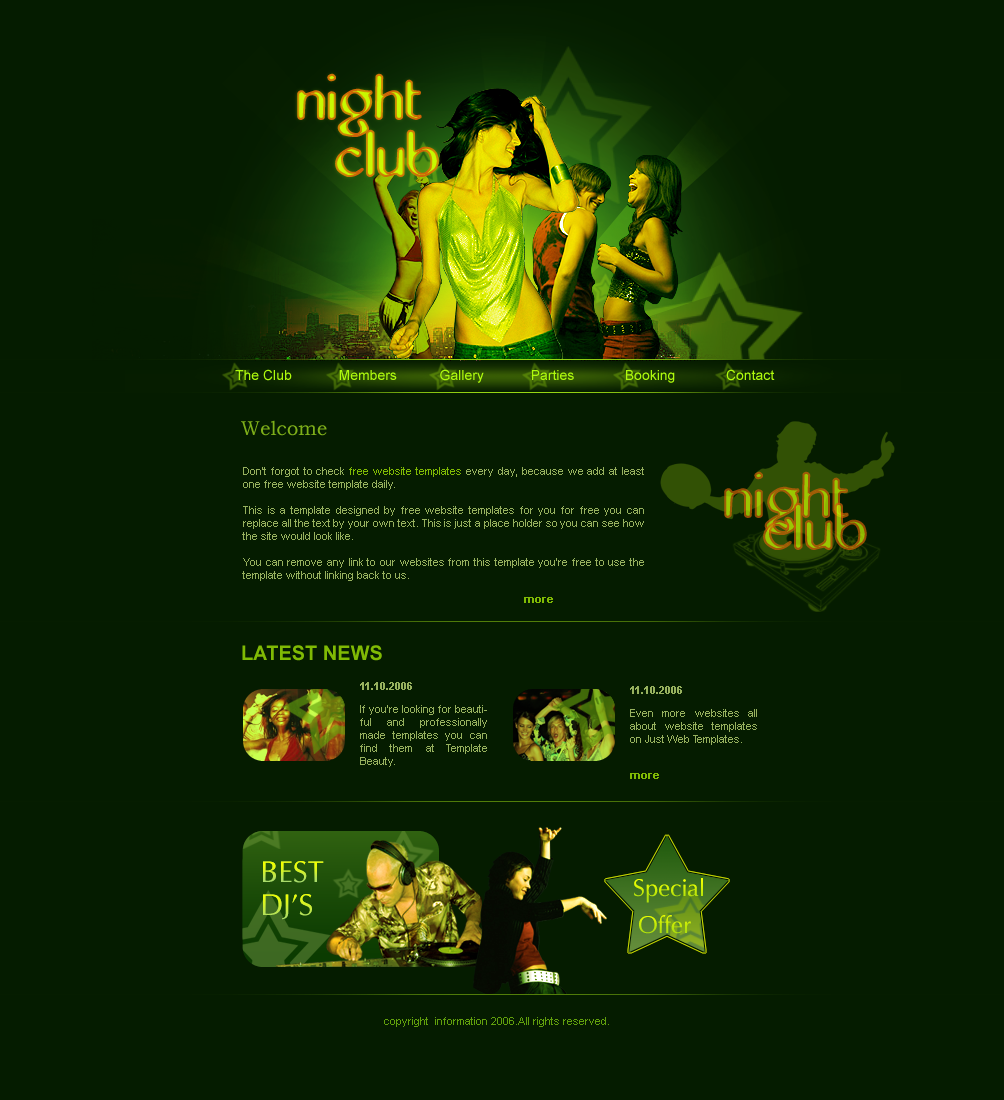
<style>
.page{position:relative;width:1004px;height:1100px;background:#051c00}
.page>*{position:absolute;margin:0}
.t1{font:72px "Abbey-Medium"}
.t2{font:14px "ArialMT";color:#aefa0d}
.t3{font:20px "BookmanOldStyle";color:#7eae19}
.t4{font:11px/13px "ArialMT";color:#97b15e}
.t5{font:11px/13px "ArialMT";color:#80ba04}
.t6{font:11px "Arial-BoldMT";color:#80ba04}
.t7{font:20px "Arial-BoldMT";color:#80ba04;text-transform:uppercase}
.t8{font:11px "Arial-BoldMT";color:#97b15e}
.t9{font:30px "ZapfHumanist601BT-Roman"}
.t10{font:24px "ZapfHumanist601BT-Roman";color:#ceee06}
.t11{font:24px "ZapfHumanist601BT-Roman";color:#b0e00b}
.t12{font:11px "ArialMT";color:#61a00c}
</style>
<div class="page">
<p class="t1" style="left:297px;top:73px;width:125px;height:64px">night</p>
<p class="t1" style="left:335px;top:129px;width:104px;height:48px">club</p>
<p class="t2" style="left:235px;top:369px;width:540px;height:14px">The Club            Members           Gallery            Parties             Booking             Contact</p>
<p class="t3" style="left:241px;top:420px;width:86px;height:16px">Welcome</p>
<p class="t4" style="left:242px;top:467px;width:402px;height:114px;text-align:justify">Don't forgot to check <span class="t5">free website templates</span> every day, because we add at least one free website template daily.<br><br>This is a template designed by free website templates for you for free you can replace all the text by your own text. This is just a place holder so you can see how the site would look like.<br><br>You can remove any link to our websites from this template you're free to use the template without linking back to us.<br><br>If you're having problems editing the template please don't hesitate to ask for help on the forum.<br><br>If you're looking for beautiful and professionally made templates you can find them at Template Beauty.<br><br>Even more websites all about website templates on Just Web Templates.</p>
<p class="t6" style="left:524px;top:597px;width:29px;height:6px">more</p>
<p class="t7" style="left:242px;top:645px;width:140px;height:16px">Latest News</p>
<p class="t8" style="left:360px;top:682px;width:52px;height:8px">11.10.2006</p>
<p class="t8" style="left:630px;top:686px;width:52px;height:8px">11.10.2006</p>
<p class="t4" style="left:360px;top:705px;width:127px;height:62px;text-align:justify">If you're looking for beautiful and professionally made templates you can find them at Template Beauty.</p>
<p class="t4" style="left:630px;top:709px;width:127px;height:36px;text-align:justify">Even more websites all about website templates on Just Web Templates.</p>
<p class="t6" style="left:630px;top:773px;width:29px;height:6px">more</p>
<p class="t9" style="left:263px;top:861px;width:61px;height:22px">BEST</p>
<p class="t10" style="left:634px;top:878px;width:69px;height:25px">Special</p>
<p class="t9" style="left:263px;top:894px;width:49px;height:26px">DJ’S</p>
<p class="t11" style="left:639px;top:915px;width:52px;height:19px">Offer</p>
<p class="t12" style="left:384px;top:1017px;width:225px;height:10px">copyright  information 2006.All rights reserved.</p>
</div>
